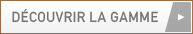
<style>
.page{position:relative;width:193px;height:34px}
.page>*{position:absolute;margin:0}
.t1{font:14.4px "DINAlternate-Bold";letter-spacing:0.015em;color:#757575;text-transform:uppercase}
</style>
<div class="page">
<p class="t1" style="left:12px;top:9px;width:146px;height:14px">découvrir la gamme</p>
</div>
